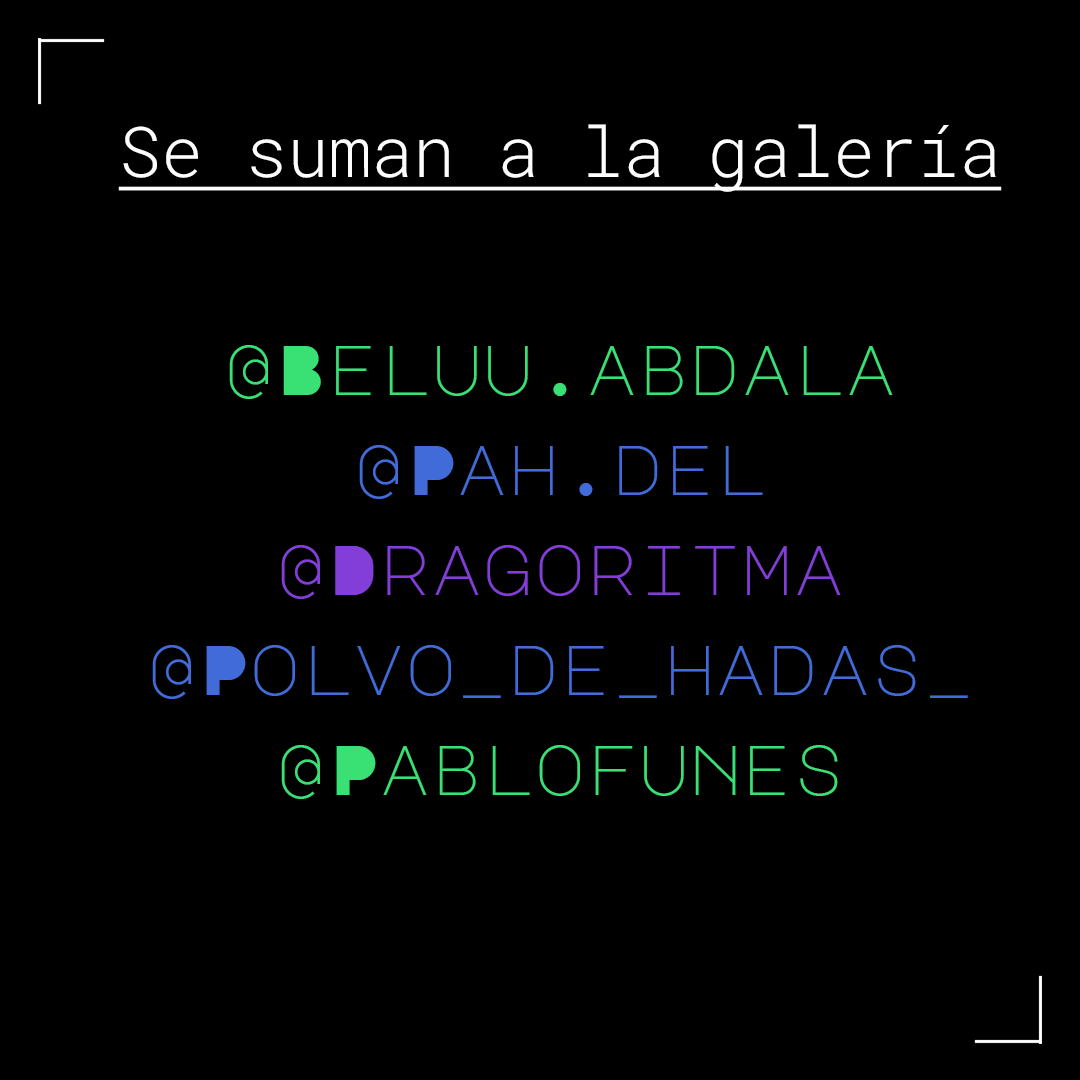
<style>
.page{position:relative;width:1080px;height:1080px;background:#000000}
.page>*{position:absolute;margin:0}
.t1{font:70px "RobotoMono-Light";color:#fdfdfd;text-decoration:underline}
.t2{font:70px/100px "MajorMonoDisplay-Regular";color:#416bd9}
.t3{font:70px/100px "MajorMonoDisplay-Regular";color:#39e174}
.t4{font:70px/100px "MajorMonoDisplay-Regular";color:#833ed9}
</style>
<div class="page">
<p class="t1" style="left:118px;top:124px;width:884px;height:68px">Se suman a la galería</p>
<p class="t2" style="left:152px;top:345px;width:816px;height:454px;text-align:center"><span class="t3">@Beluu.abdala<br></span>@Pah.del<br><span class="t4">@Dragoritma<br></span>@Polvo_de_hadas_<br><span class="t3">@Pablofunes</span></p>
</div>
